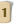
<style>
.page{position:relative;width:14px;height:25px}
.page>*{position:absolute;margin:0}
.t1{font:12px "Impact";color:#6b5a20}
</style>
<div class="page">
<p class="t1" style="left:2px;top:8px;width:5px;height:9px">1</p>
</div>
